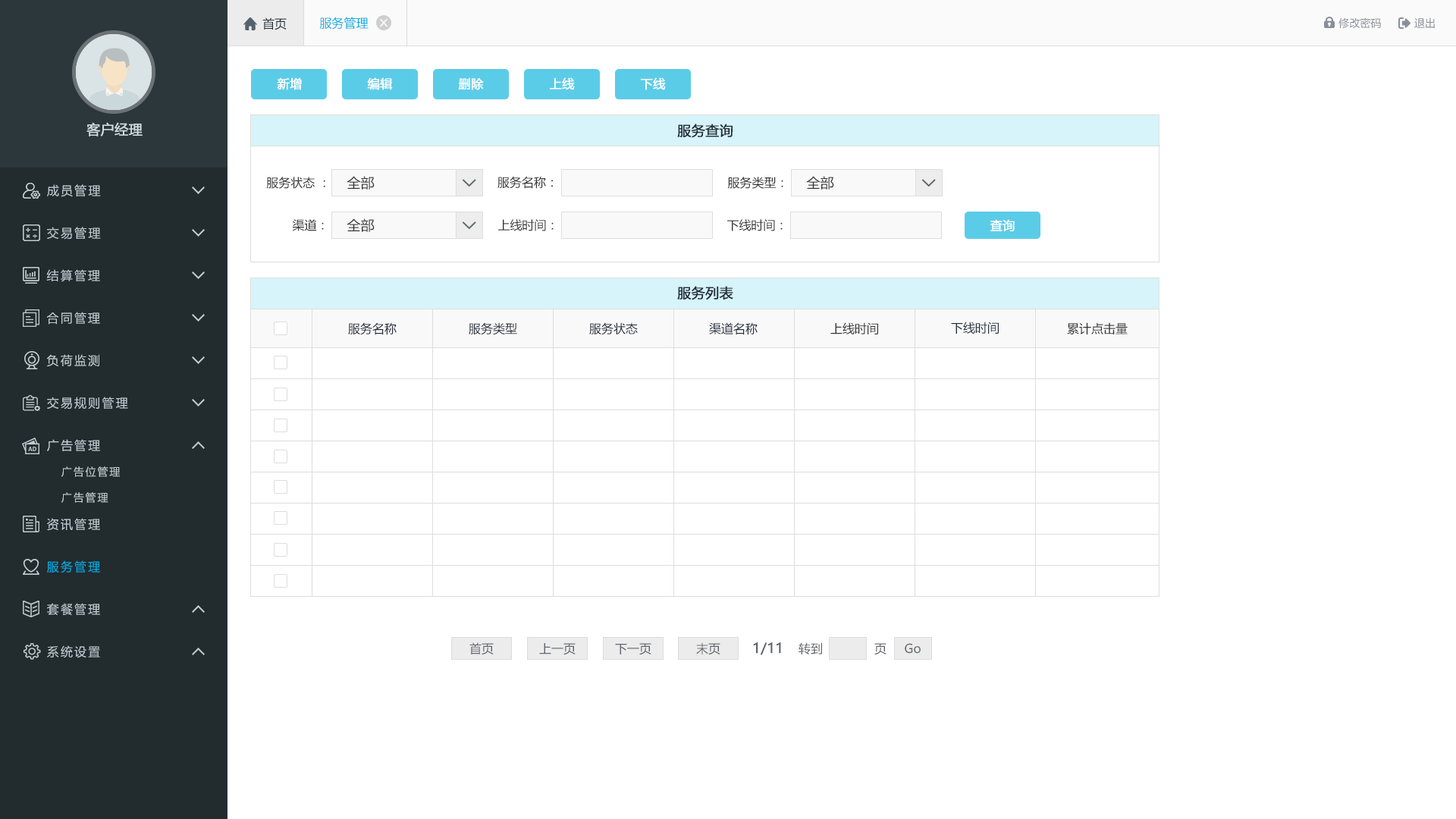
<style>
.page{position:relative;width:1456px;height:819px;background:#ffffff}
.page>*{position:absolute;margin:0}
.t1{font:12.1px "MicrosoftYaHei";color:#242e3b}
.t2{font:12.1px "MicrosoftYaHei";color:#00ace2}
.t3{font:10.6px "MicrosoftYaHei";color:#8a8f99}
.t4{font:12.1px "MicrosoftYaHei";color:#ffffff;font-weight:bold}
.t5{font:13.6px "MicrosoftYaHei";color:#d1dce2;font-weight:bold}
.t6{font:13.6px "MicrosoftYaHei";color:#242e3b;font-weight:bold}
.t7{font:12.1px "MicrosoftYaHei";letter-spacing:0.14em;color:#c2cdd2}
.t8{font:12.1px "MicrosoftYaHei";color:#333333}
.t9{font:13.6px "MicrosoftYaHei";color:#333333}
.t10{font:10.6px "MicrosoftYaHei";letter-spacing:0.14em;color:#c2cdd2}
.t11{font:12.1px "MicrosoftYaHei";letter-spacing:0.14em;color:#00ace2}
.t12{font:12.1px "MicrosoftYaHei";color:#61656b}
.t13{font:13.6px "MicrosoftYaHei";color:#61656b;font-weight:bold}
</style>
<div class="page">
<p class="t1" style="left:262px;top:17px;width:25px;height:13px">首页</p>
<p class="t2" style="left:319px;top:17px;width:50px;height:13px">服务管理</p>
<p class="t3" style="left:1338px;top:17px;width:43px;height:12px">修改密码</p>
<p class="t3" style="left:1414px;top:17px;width:21px;height:11px">退出</p>
<p class="t4" style="left:277px;top:77px;width:25px;height:13px">新增</p>
<p class="t4" style="left:367px;top:77px;width:26px;height:13px">编辑</p>
<p class="t4" style="left:458px;top:77px;width:26px;height:13px">删除</p>
<p class="t4" style="left:550px;top:77px;width:25px;height:13px">上线</p>
<p class="t4" style="left:641px;top:77px;width:25px;height:13px">下线</p>
<p class="t5" style="left:86px;top:122px;width:57px;height:14px">客户经理</p>
<p class="t6" style="left:677px;top:124px;width:56px;height:14px">服务查询</p>
<p class="t7" style="left:47px;top:184px;width:54px;height:13px">成员管理</p>
<p class="t8" style="left:266px;top:177px;width:59px;height:12px">服务状态 ：</p>
<p class="t9" style="left:347px;top:176px;width:28px;height:14px">全部</p>
<p class="t8" style="left:497px;top:176px;width:56px;height:13px">服务名称：</p>
<p class="t8" style="left:727px;top:177px;width:56px;height:12px">服务类型：</p>
<p class="t9" style="left:806px;top:176px;width:28px;height:14px">全部</p>
<p class="t8" style="left:292px;top:219px;width:32px;height:12px">渠道：</p>
<p class="t9" style="left:347px;top:218px;width:28px;height:14px">全部</p>
<p class="t8" style="left:498px;top:219px;width:56px;height:12px">上线时间：</p>
<p class="t8" style="left:727px;top:219px;width:56px;height:12px">下线时间：</p>
<p class="t4" style="left:990px;top:219px;width:25px;height:12px">查询</p>
<p class="t7" style="left:47px;top:227px;width:54px;height:13px">交易管理</p>
<p class="t7" style="left:46px;top:269px;width:54px;height:13px">结算管理</p>
<p class="t6" style="left:677px;top:286px;width:56px;height:14px">服务列表</p>
<p class="t7" style="left:46px;top:312px;width:54px;height:13px">合同管理</p>
<p class="t1" style="left:348px;top:322px;width:49px;height:13px">服务名称</p>
<p class="t1" style="left:469px;top:322px;width:48px;height:13px">服务类型</p>
<p class="t1" style="left:589px;top:322px;width:49px;height:13px">服务状态</p>
<p class="t1" style="left:709px;top:322px;width:49px;height:13px">渠道名称</p>
<p class="t8" style="left:830px;top:322px;width:48px;height:12px">上线时间</p>
<p class="t1" style="left:951px;top:322px;width:48px;height:12px">下线时间</p>
<p class="t8" style="left:1067px;top:322px;width:61px;height:12px">累计点击量</p>
<p class="t7" style="left:46px;top:354px;width:53px;height:13px">负荷监测</p>
<p class="t7" style="left:47px;top:397px;width:81px;height:12px">交易规则管理</p>
<p class="t7" style="left:47px;top:439px;width:53px;height:12px">广告管理</p>
<p class="t10" style="left:61px;top:466px;width:59px;height:11px">广告位管理</p>
<p class="t10" style="left:61px;top:492px;width:47px;height:11px">广告管理</p>
<p class="t7" style="left:47px;top:518px;width:53px;height:13px">资讯管理</p>
<p class="t11" style="left:47px;top:560px;width:53px;height:13px">服务管理</p>
<p class="t7" style="left:47px;top:603px;width:53px;height:13px">套餐管理</p>
<p class="t7" style="left:47px;top:645px;width:53px;height:13px">系统设置</p>
<p class="t12" style="left:469px;top:642px;width:25px;height:13px">首页</p>
<p class="t12" style="left:539px;top:643px;width:37px;height:12px">上一页</p>
<p class="t12" style="left:615px;top:643px;width:36px;height:12px">下一页</p>
<p class="t12" style="left:696px;top:642px;width:24px;height:13px">末页</p>
<p class="t13" style="left:753px;top:642px;width:28px;height:13px">1/11</p>
<p class="t12" style="left:799px;top:642px;width:23px;height:12px">转到</p>
<p class="t12" style="left:874px;top:643px;width:12px;height:12px">页</p>
<p class="t12" style="left:905px;top:643px;width:16px;height:11px">Go</p>
</div>
